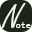
<style>
.page{position:relative;width:32px;height:32px;background:#1e2518}
.page>*{position:absolute;margin:0}
.t1{font:18px "SimSun";color:#000000}
.t2{font:36px "FreestyleScript-Regular";color:#f4f4f4}
.t3{font:10px "SimSun";color:#ffffff}
</style>
<div class="page">
<p class="t1" style="left:1px;top:3px;width:25px;height:25px"><span class="t2">N<br></span>ote</p>
<p class="t3" style="left:16px;top:22px;width:15px;height:6px">ote</p>
</div>
